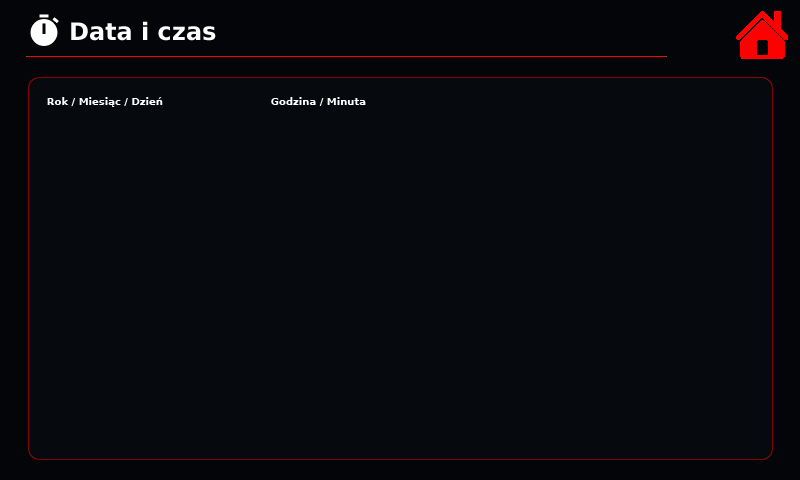
<style>
.page{position:relative;width:800px;height:480px;background:#06090d}
.page>*{position:absolute;margin:0}
.t1{font:24px "DejaVuSans-Bold";color:#ffffff}
.t2{font:10px "DejaVuSans-Bold";color:#ffffff}
</style>
<div class="page">
<p class="t1" style="left:71px;top:21px;width:145px;height:20px">Data i czas</p>
<p class="t2" style="left:47px;top:97px;width:116px;height:10px">Rok / Miesiąc / Dzień</p>
<p class="t2" style="left:271px;top:97px;width:95px;height:9px">Godzina / Minuta</p>
</div>
